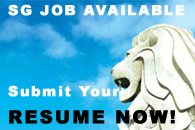
<style>
.page{position:relative;width:195px;height:130px}
.page>*{position:absolute;margin:0}
.t1{font:14px "Arial-Black";letter-spacing:0.1em;color:#ffffff;font-weight:bold}
.t2{font:18px "Arial-Black";letter-spacing:0.1em;color:#000000;font-weight:bold}
</style>
<div class="page">
<p class="t1" style="left:8px;top:4px;width:177px;height:12px">SG JOB AVAILABLE</p>
<p class="t1" style="left:8px;top:85px;width:167px;height:39px">Submit Your<br><span class="t2">RESUME NOW!</span></p>
</div>
